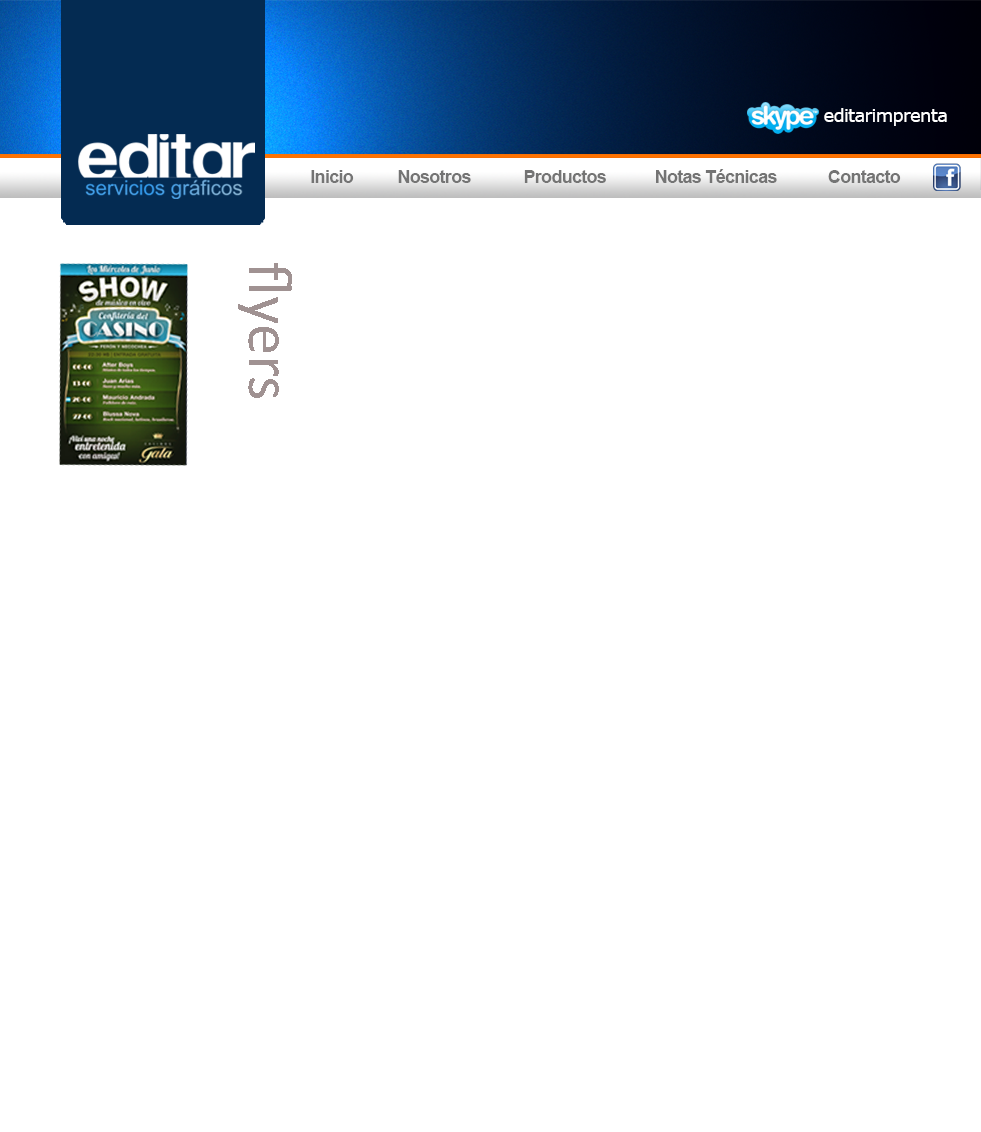
<style>
.page{position:relative;width:981px;height:1132px;background:#ffffff}
.page>*{position:absolute;margin:0}
.t1{font:18px "Verdana";letter-spacing:-0.04em;color:#ffffff}
.t2{font:18px "Arial-BoldMT";letter-spacing:-0.04em;color:#747474}
.t3{font:63.2px "Calibri";color:#a09292}
</style>
<div class="page">
<p class="t1" style="left:824px;top:108px;width:123px;height:18px">editarimprenta</p>
<p class="t2" style="left:311px;top:170px;width:43px;height:13px">Inicio</p>
<p class="t2" style="left:398px;top:170px;width:73px;height:13px">Nosotros</p>
<p class="t2" style="left:524px;top:170px;width:82px;height:13px">Productos</p>
<p class="t2" style="left:656px;top:169px;width:121px;height:14px">Notas Técnicas</p>
<p class="t2" style="left:828px;top:170px;width:73px;height:13px">Contacto</p>
<p class="t3" style="left:238px;top:263px;width:54px;height:135px;rotate:90deg">flyers</p>
</div>
